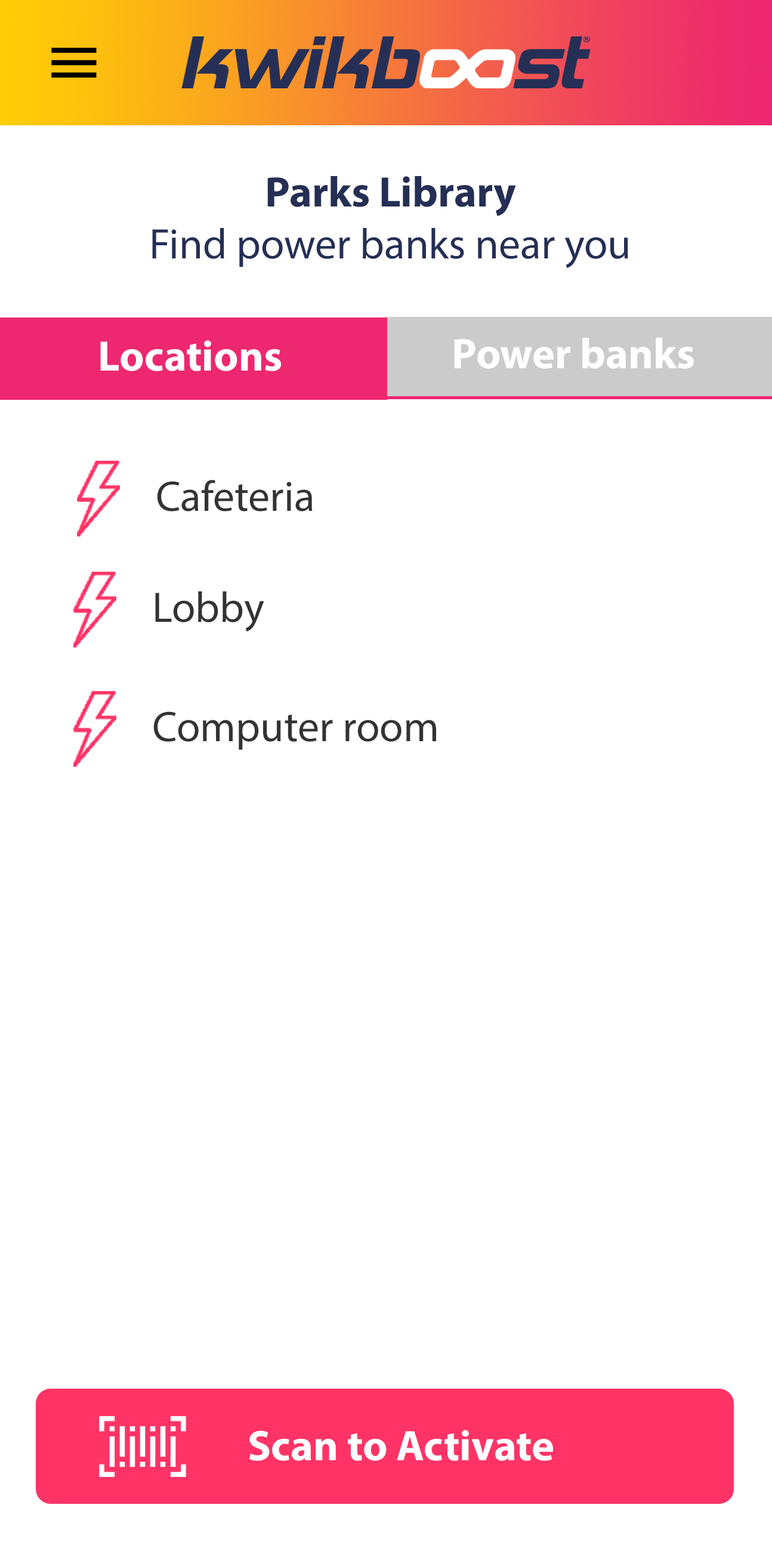
<style>
.page{position:relative;width:772px;height:1545px;background:#ffffff}
.page>*{position:absolute;margin:0}
.t1{font:43px "MyriadPro-Regular";color:#252f55}
.t2{font:43px "MyriadPro-Bold";color:#252f55}
.t3{font:43px "MyriadPro-Bold";color:#ffffff}
.t4{font:43px "MyriadPro-Regular";color:#333333}
</style>
<div class="page">
<p class="t1" style="left:152px;top:176px;width:476px;height:92px;text-align:center"><span class="t2">Parks Library<br></span>Find power banks near you</p>
<p class="t3" style="left:100px;top:340px;width:181px;height:31px">Locations</p>
<p class="t3" style="left:454px;top:338px;width:240px;height:31px">Power banks</p>
<p class="t4" style="left:157px;top:480px;width:156px;height:31px">Cafeteria</p>
<p class="t4" style="left:155px;top:591px;width:109px;height:40px">Lobby</p>
<p class="t4" style="left:153px;top:711px;width:283px;height:39px">Computer room</p>
<p class="t3" style="left:249px;top:1429px;width:304px;height:31px">Scan to Activate</p>
</div>
